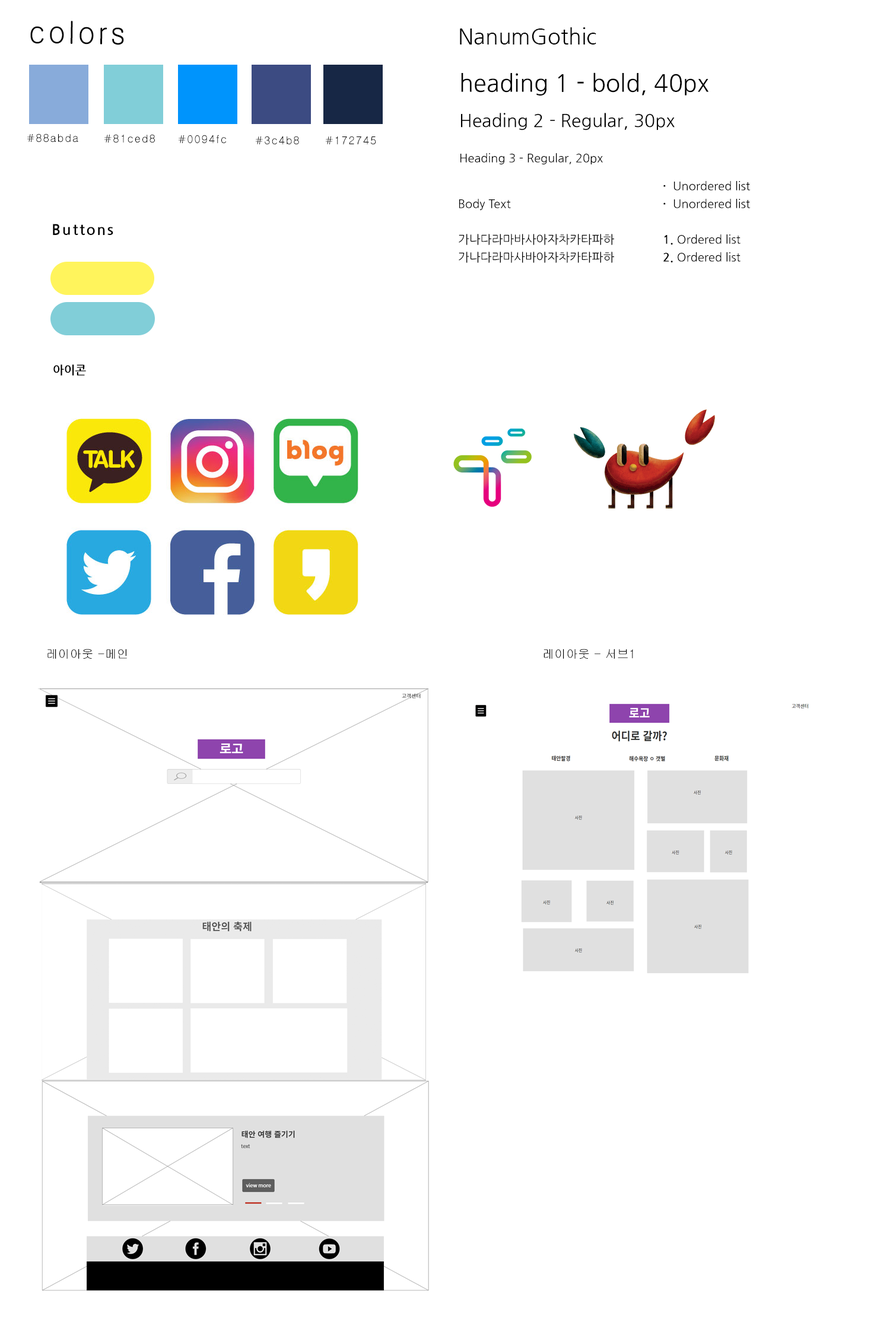
<style>
.page{position:relative;width:890px;height:1340px;background:#ffffff}
.page>*{position:absolute;margin:0}
.t1{font:30.7px "Gulim";letter-spacing:0.1em;color:#000000;scale:0.94 1}
.t2{font:21.4px "NanumGothic";color:#000000}
.t3{font:17.8px/35.6px "NanumGothic";color:#000000}
.t4{font:23.7px/35.6px "NanumGothic";color:#000000}
.t5{font:11.9px/35.6px "NanumGothic";color:#000000}
.t6{font:10.7px "Gulim";letter-spacing:0.1em;color:#000000}
.t7{font:11.9px/17.8px "NanumGothic";color:#000000}
.t8{font:11.9px/17.8px "NanumGothicBold";color:#000000}
.t9{font:14.8px "NanumGothicBold";letter-spacing:0.1em;color:#000000}
.t10{font:11.9px "NanumGothicBold";color:#000000}
.t11{font:11.9px "Gulim";color:#000000}
</style>
<div class="page">
<p class="t1" style="left:30px;top:21px;width:94px;height:24px;rotate:1deg">colors</p>
<p class="t2" style="left:460px;top:27px;width:136px;height:18px">NanumGothic</p>
<p class="t3" style="left:460px;top:72px;width:248px;height:92px"><span class="t4">heading 1 - bold, 40px<br></span>Heading 2 - Regular, 30px <br><span class="t5">Heading 3 - Regular, 20px</span></p>
<p class="t6" style="left:27px;top:134px;width:51px;height:8px">#88abda</p>
<p class="t6" style="left:104px;top:134px;width:51px;height:9px">#81ced8</p>
<p class="t6" style="left:179px;top:135px;width:47px;height:9px">#0094fc</p>
<p class="t6" style="left:256px;top:136px;width:43px;height:9px">#3c4b82</p>
<p class="t6" style="left:326px;top:136px;width:50px;height:9px">#172745</p>
<p class="t7" style="left:663px;top:181px;width:88px;height:82px"><span class="t8">·</span>  Unordered list<br><span class="t8">· </span> Unordered list<br><br><span class="t8">1. </span>Ordered list <br><span class="t8">2. </span>Ordered list</p>
<p class="t7" style="left:459px;top:199px;width:155px;height:64px">Body Text<br><br>가나다라마바사아자차카타파하 가나다라마사바아자차카타파하</p>
<p class="t9" style="left:53px;top:224px;width:60px;height:11px">Buttons</p>
<p class="t10" style="left:53px;top:364px;width:33px;height:12px">아이콘</p>
<p class="t11" style="left:47px;top:649px;width:80px;height:10px">레이아웃 -메인</p>
<p class="t11" style="left:544px;top:649px;width:89px;height:10px">레이아웃 - 서브1</p>
</div>
